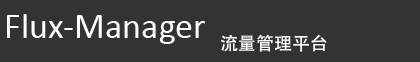
<style>
.page{position:relative;width:420px;height:62px;background:#333333}
.page>*{position:absolute;margin:0}
.t1{font:36px "Calibri";color:#ffffff}
.t2{font:18px "AdobeHeitiStd-Regular";color:#ffffff}
</style>
<div class="page">
<p class="t1" style="left:7px;top:14px;width:198px;height:30px">Flux-Manager</p>
<p class="t2" style="left:221px;top:34px;width:106px;height:18px">流量管理平台</p>
</div>
